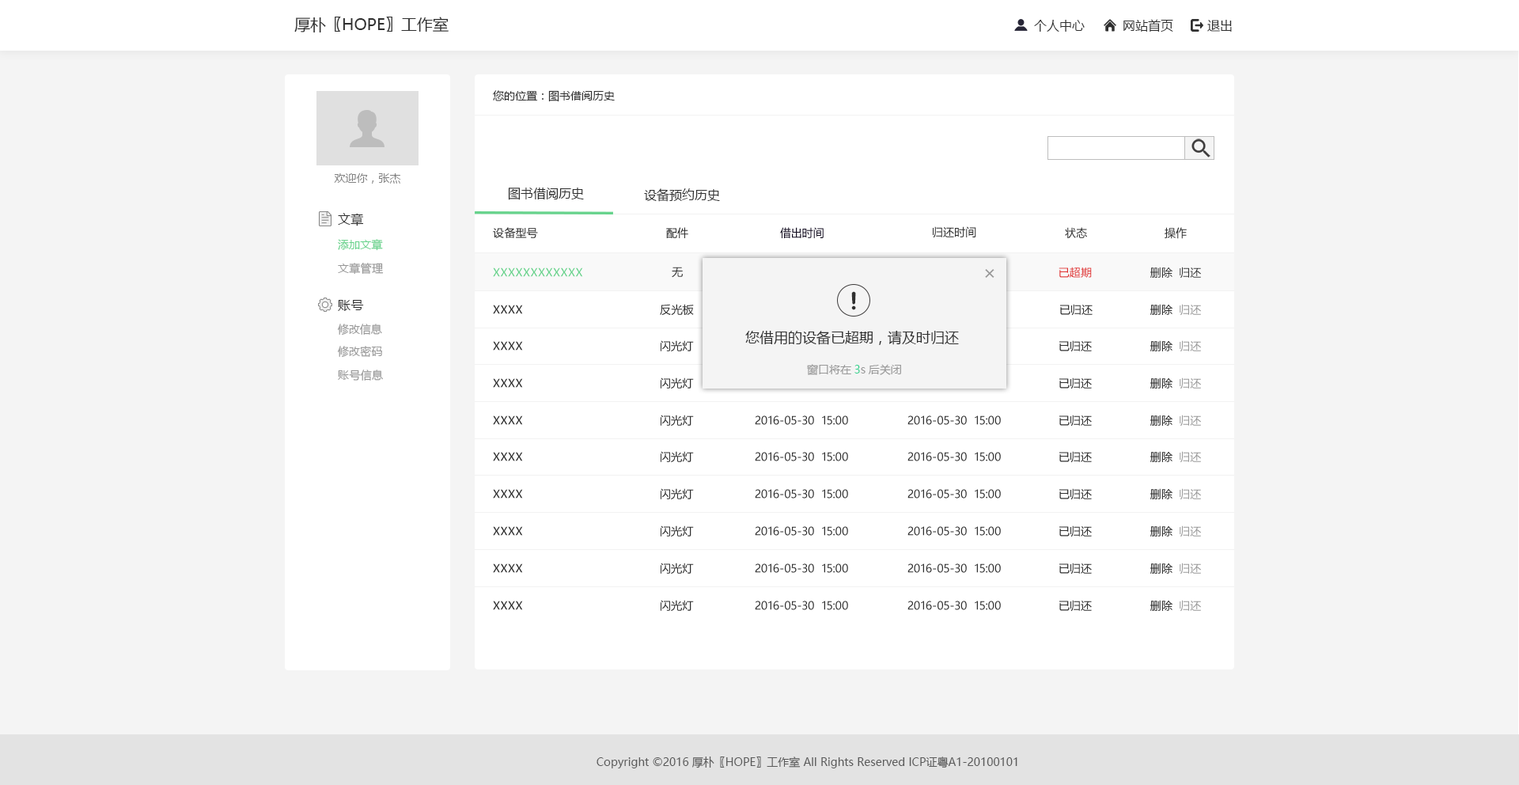
<style>
.page{position:relative;width:1519px;height:785px;background:#ffffff}
.page>*{position:absolute;margin:0}
.t1{font:15.8px "MicrosoftYaHei";color:#2f2f2f}
.t2{font:12.7px "MicrosoftYaHei";color:#2f2f2f}
.t3{font:11.1px "MicrosoftYaHei";color:#2f2f2f}
.t4{font:11.1px "MicrosoftYaHei";color:#818181}
.t5{font:11.1px "MicrosoftYaHei";color:#150f22}
.t6{font:11.1px "MicrosoftYaHei";color:#67d38c}
.t7{font:11.1px "MicrosoftYaHei";color:#989898}
.t8{font:19px "MicrosoftYaHei";color:#989898}
.t9{font:11.1px "MicrosoftYaHei";color:#e02f2f}
.t10{font:19px "STHupo";color:#2f2f2f}
.t11{font:14.2px "MicrosoftYaHei";color:#2f2f2f}
.t12{font:11.1px "MicrosoftYaHei";color:#31d28e}
.t13{font:11.1px "MicrosoftYaHei";color:#5a5a5a}
</style>
<div class="page">
<p class="t1" style="left:294px;top:17px;width:155px;height:15px">厚朴〖HOPE〗工作室</p>
<p class="t2" style="left:1034px;top:20px;width:51px;height:12px">个人中心</p>
<p class="t2" style="left:1124px;top:19px;width:49px;height:13px">网站首页</p>
<p class="t2" style="left:1207px;top:20px;width:25px;height:12px">退出</p>
<p class="t3" style="left:493px;top:90px;width:122px;height:12px">您的位置：图书借阅历史</p>
<p class="t4" style="left:334px;top:173px;width:67px;height:11px">欢迎你，张杰</p>
<p class="t2" style="left:508px;top:188px;width:76px;height:12px">图书借阅历史</p>
<p class="t2" style="left:644px;top:188px;width:76px;height:14px">设备预约历史</p>
<p class="t2" style="left:338px;top:213px;width:26px;height:13px">文章</p>
<p class="t3" style="left:493px;top:227px;width:45px;height:11px">设备型号</p>
<p class="t3" style="left:666px;top:227px;width:22px;height:11px">配件</p>
<p class="t5" style="left:780px;top:227px;width:44px;height:11px">借出时间</p>
<p class="t3" style="left:933px;top:226px;width:43px;height:12px">归还时间</p>
<p class="t3" style="left:1065px;top:227px;width:22px;height:11px">状态</p>
<p class="t3" style="left:1165px;top:227px;width:22px;height:12px">操作</p>
<p class="t6" style="left:338px;top:239px;width:45px;height:12px">添加文章</p>
<p class="t7" style="left:338px;top:263px;width:46px;height:12px">文章管理</p>
<p class="t6" style="left:493px;top:267px;width:90px;height:10px">XXXXXXXXXXXX</p>
<p class="t3" style="left:672px;top:267px;width:11px;height:11px">无</p>
<p class="t8" style="left:985px;top:269px;width:10px;height:9px">×</p>
<p class="t9" style="left:1059px;top:267px;width:33px;height:11px">已超期</p>
<p class="t3" style="left:1150px;top:267px;width:51px;height:12px">删除  归还</p>
<p class="t10" style="left:851px;top:291px;width:5px;height:19px">！</p>
<p class="t2" style="left:338px;top:300px;width:26px;height:11px">账号</p>
<p class="t3" style="left:493px;top:305px;width:30px;height:9px">XXXX</p>
<p class="t3" style="left:660px;top:304px;width:34px;height:11px">反光板</p>
<p class="t3" style="left:1060px;top:304px;width:33px;height:12px">已归还</p>
<p class="t3" style="left:1150px;top:304px;width:51px;height:12px">删除 <span class="t7"> 归还</span></p>
<p class="t7" style="left:338px;top:324px;width:44px;height:11px">修改信息</p>
<p class="t11" style="left:745px;top:330px;width:214px;height:15px">您借用的设备已超期，请及时归还</p>
<p class="t3" style="left:493px;top:341px;width:30px;height:10px">XXXX</p>
<p class="t3" style="left:661px;top:340px;width:33px;height:11px">闪光灯</p>
<p class="t3" style="left:1059px;top:340px;width:33px;height:12px">已归还</p>
<p class="t3" style="left:1150px;top:340px;width:51px;height:12px">删除 <span class="t7"> 归还</span></p>
<p class="t7" style="left:338px;top:346px;width:44px;height:12px">修改密码</p>
<p class="t7" style="left:807px;top:364px;width:94px;height:11px">窗口将在<span class="t12">3</span>s后关闭</p>
<p class="t7" style="left:338px;top:370px;width:45px;height:11px">账号信息</p>
<p class="t3" style="left:661px;top:377px;width:33px;height:12px">闪光灯</p>
<p class="t3" style="left:1059px;top:377px;width:33px;height:12px">已归还</p>
<p class="t3" style="left:1150px;top:377px;width:51px;height:12px">删除 <span class="t7"> 归还</span></p>
<p class="t3" style="left:493px;top:378px;width:30px;height:10px">XXXX</p>
<p class="t3" style="left:493px;top:415px;width:30px;height:10px">XXXX</p>
<p class="t3" style="left:661px;top:415px;width:33px;height:11px">闪光灯</p>
<p class="t3" style="left:755px;top:415px;width:93px;height:10px">2016-05-30  15:00</p>
<p class="t3" style="left:908px;top:415px;width:93px;height:10px">2016-05-30  15:00</p>
<p class="t3" style="left:1059px;top:415px;width:33px;height:11px">已归还</p>
<p class="t3" style="left:1150px;top:415px;width:51px;height:11px">删除 <span class="t7"> 归还</span></p>
<p class="t3" style="left:493px;top:452px;width:30px;height:9px">XXXX</p>
<p class="t3" style="left:661px;top:451px;width:33px;height:11px">闪光灯</p>
<p class="t3" style="left:755px;top:452px;width:93px;height:9px">2016-05-30  15:00</p>
<p class="t3" style="left:908px;top:452px;width:93px;height:9px">2016-05-30  15:00</p>
<p class="t3" style="left:1059px;top:451px;width:33px;height:12px">已归还</p>
<p class="t3" style="left:1150px;top:451px;width:51px;height:12px">删除 <span class="t7"> 归还</span></p>
<p class="t3" style="left:493px;top:489px;width:30px;height:9px">XXXX</p>
<p class="t3" style="left:661px;top:488px;width:33px;height:11px">闪光灯</p>
<p class="t3" style="left:755px;top:489px;width:93px;height:9px">2016-05-30  15:00</p>
<p class="t3" style="left:908px;top:489px;width:93px;height:9px">2016-05-30  15:00</p>
<p class="t3" style="left:1059px;top:488px;width:33px;height:12px">已归还</p>
<p class="t3" style="left:1150px;top:488px;width:51px;height:12px">删除 <span class="t7"> 归还</span></p>
<p class="t3" style="left:493px;top:526px;width:30px;height:10px">XXXX</p>
<p class="t3" style="left:661px;top:525px;width:33px;height:11px">闪光灯</p>
<p class="t3" style="left:755px;top:526px;width:93px;height:10px">2016-05-30  15:00</p>
<p class="t3" style="left:908px;top:526px;width:93px;height:10px">2016-05-30  15:00</p>
<p class="t3" style="left:1059px;top:525px;width:33px;height:12px">已归还</p>
<p class="t3" style="left:1150px;top:525px;width:51px;height:12px">删除 <span class="t7"> 归还</span></p>
<p class="t3" style="left:493px;top:563px;width:30px;height:10px">XXXX</p>
<p class="t3" style="left:661px;top:563px;width:33px;height:11px">闪光灯</p>
<p class="t3" style="left:755px;top:563px;width:93px;height:10px">2016-05-30  15:00</p>
<p class="t3" style="left:908px;top:563px;width:93px;height:10px">2016-05-30  15:00</p>
<p class="t3" style="left:1059px;top:563px;width:33px;height:11px">已归还</p>
<p class="t3" style="left:1150px;top:563px;width:51px;height:11px">删除 <span class="t7"> 归还</span></p>
<p class="t3" style="left:493px;top:601px;width:30px;height:9px">XXXX</p>
<p class="t3" style="left:661px;top:600px;width:33px;height:11px">闪光灯</p>
<p class="t3" style="left:755px;top:601px;width:93px;height:9px">2016-05-30  15:00</p>
<p class="t3" style="left:908px;top:601px;width:93px;height:9px">2016-05-30  15:00</p>
<p class="t3" style="left:1059px;top:600px;width:33px;height:12px">已归还</p>
<p class="t3" style="left:1150px;top:600px;width:51px;height:12px">删除 <span class="t7"> 归还</span></p>
<p class="t13" style="left:597px;top:756px;width:421px;height:12px">Copyright ©2016 厚朴〖HOPE〗工作室 All Rights Reserved ICP证粤A1-20100101</p>
</div>
